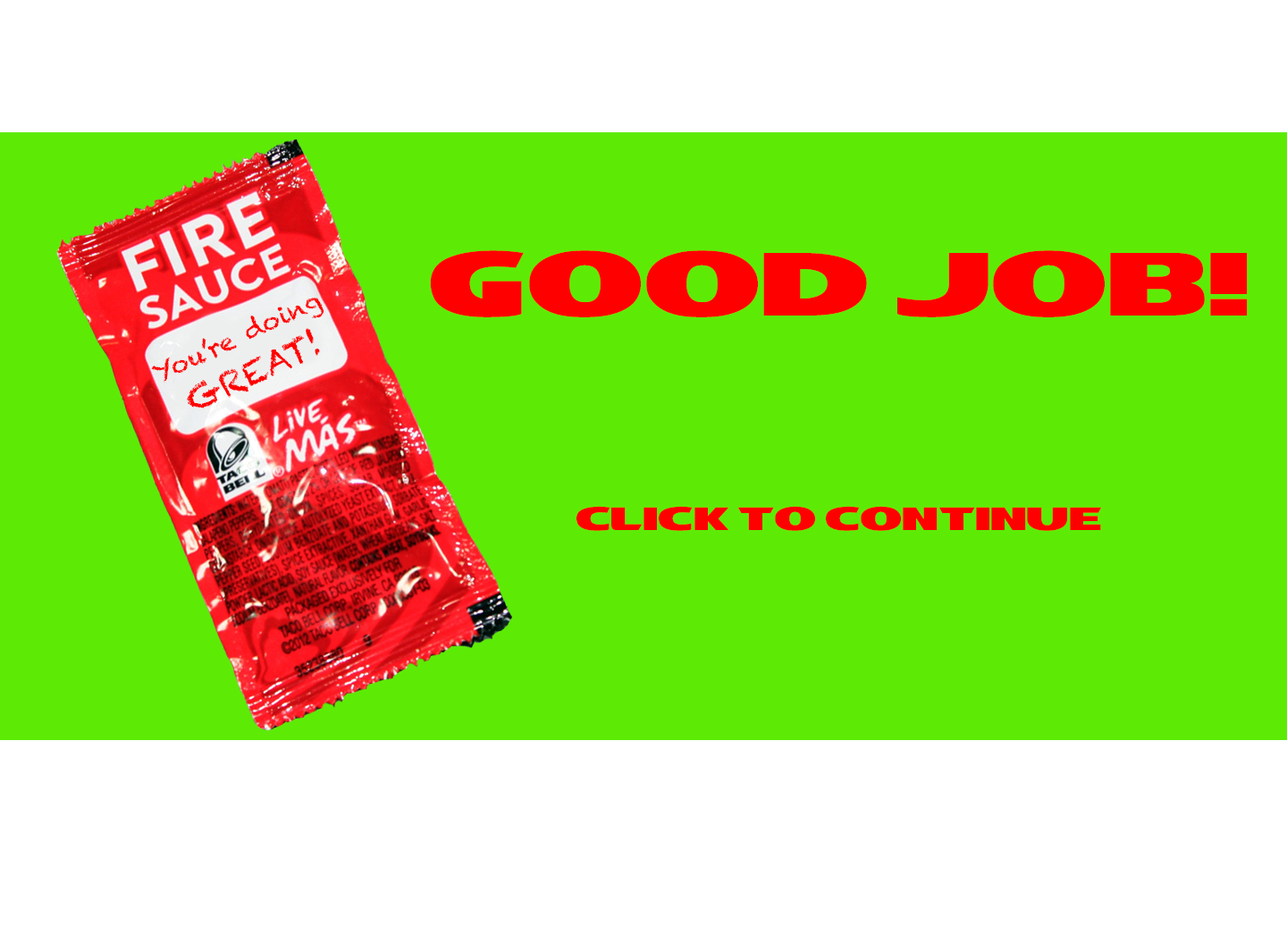
<style>
.page{position:relative;width:1287px;height:926px;background:#5deb06}
.page>*{position:absolute;margin:0}
.t1{font:32.2px/53.6px "TacoBell-Bold";color:#ff0000}
.t2{font:89.4px/53.6px "TacoBell-Bold";color:#ff0000}
.t3{font:25px/41.6px "Chalkduster";color:#ff0000}
.t4{font:33.3px/41.6px "Chalkduster";color:#ff0000}
</style>
<div class="page">
<p class="t1" style="left:430px;top:250px;width:818px;height:281px;text-align:center"><span class="t2">GOOD JOB!<br></span><br><br><br>CLICK TO CONTINUE</p>
<p class="t3" style="left:151px;top:297px;width:174px;height:112px;text-align:center;rotate:-25deg">You’re doing<br><span class="t4">GREAT!</span></p>
</div>
